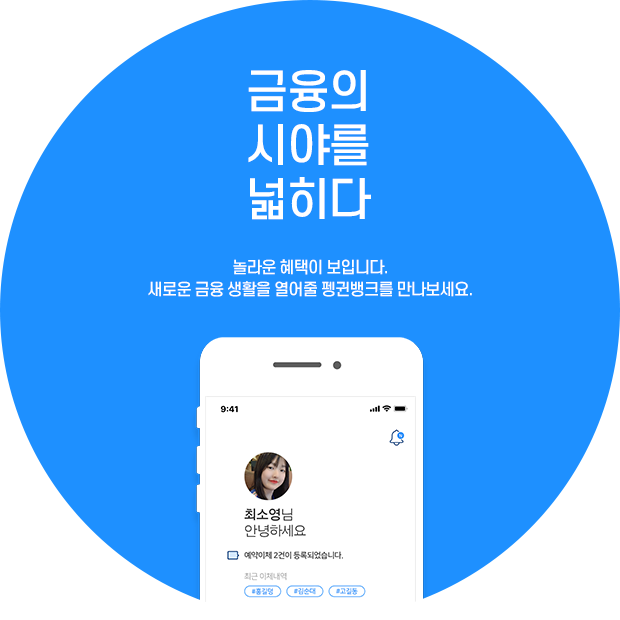
<style>
.page{position:relative;width:620px;height:620px;background:#1e90ff}
.page>*{position:absolute;margin:0}
.t1{font:45px/54px "S-CoreDream-5Medium";letter-spacing:-0.04em;color:#ffffff}
.t2{font:16px/22px "S-CoreDream-5Medium";letter-spacing:-0.06em;color:#ffffff}
</style>
<div class="page">
<p class="t1" style="left:248px;top:70px;width:123px;height:150px">금융의<br>시야를<br>넓히다</p>
<p class="t2" style="left:148px;top:259px;width:324px;height:38px;text-align:center">놀라운 혜택이 보입니다.<br>새로운 금융 생활을 열어줄 펭귄뱅크를 만나보세요.</p>
</div>
